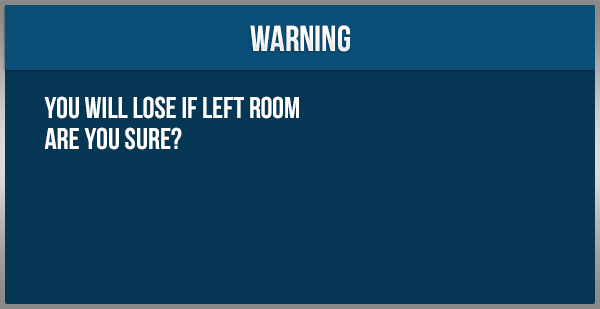
<style>
.page{position:relative;width:600px;height:309px;background:#053754}
.page>*{position:absolute;margin:0}
.t1{font:36px "UTM-Bebas";color:#ffffff}
.t2{font:30px "UTM-Bebas";color:#ffffff}
</style>
<div class="page">
<p class="t1" style="left:250px;top:25px;width:100px;height:27px">warning</p>
<p class="t2" style="left:44px;top:96px;width:255px;height:54px">you will lose if left room<br>are you sure?</p>
</div>
